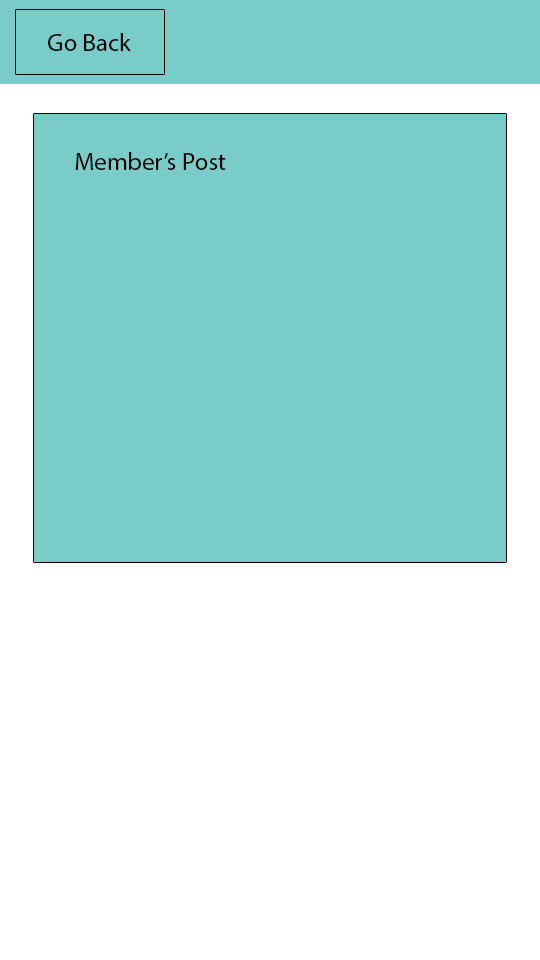
<style>
.page{position:relative;width:540px;height:960px;background:#ffffff}
.page>*{position:absolute;margin:0}
.t1{font:25px "MyriadPro-Regular";color:#000000}
</style>
<div class="page">
<p class="t1" style="left:48px;top:33px;width:83px;height:18px">Go Back</p>
<p class="t1" style="left:75px;top:152px;width:151px;height:18px">Member’s Post</p>
</div>
